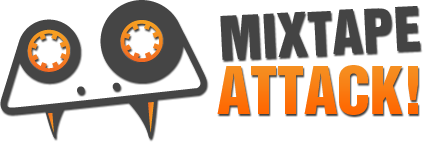
<style>
.page{position:relative;width:423px;height:142px;background:#ffffff}
.page>*{position:absolute;margin:0}
.t1{font:55px "HelveticaInseratLTStd-Roman";color:#444444}
.t2{font:60px "HelveticaInseratLTStd-Roman";color:#fa7b11}
</style>
<div class="page">
<p class="t1" style="left:220px;top:6px;width:201px;height:54px;rotate:-3deg">MIXTAPE</p>
<p class="t2" style="left:217px;top:65px;width:201px;height:50px">ATTACK!</p>
</div>
